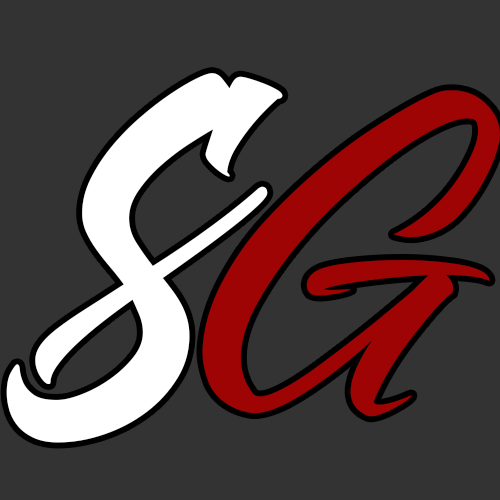
<style>
.page{position:relative;width:500px;height:500px;background:#333333}
.page>*{position:absolute;margin:0}
.t1{font:400px "ShandersFree";color:#ffffff}
.t2{font:400px "StripedKingClean";color:#9e0404}
</style>
<div class="page">
<p class="t1" style="left:6px;top:73px;width:494px;height:370px">S<span class="t2">G</span></p>
</div>
